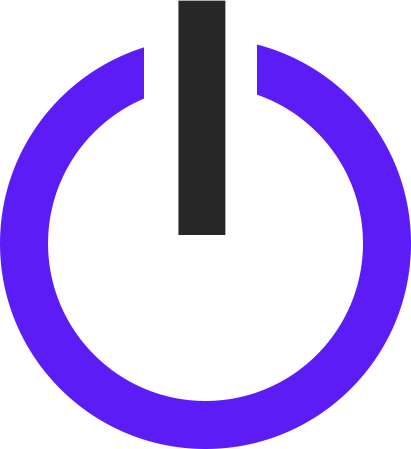
<style>
.page{position:relative;width:411px;height:449px;background:#ffffff}
.page>*{position:absolute;margin:0}
.t1{font:375px "GameOfSquids";letter-spacing:0.7em;color:#272727}
</style>
<div class="page">
<p class="t1" style="left:178px;top:0px;width:48px;height:235px">I</p>
</div>
